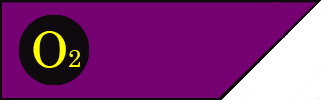
<style>
.page{position:relative;width:321px;height:100px;background:#740071}
.page>*{position:absolute;margin:0}
.t1{font:48px "Century";color:#ffff00}
.t2{font:24px "Century";color:#ffff00;font-variant:small-caps}
</style>
<div class="page">
<p class="t1" style="left:33px;top:31px;width:47px;height:37px">O<span class="t2">2</span></p>
</div>
